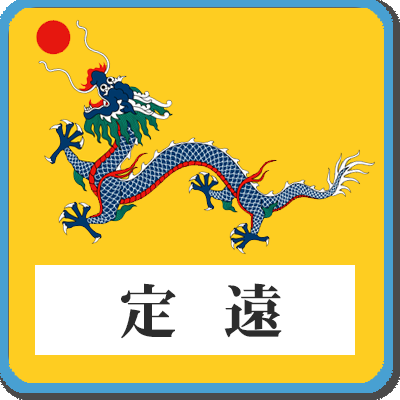
<style>
.page{position:relative;width:400px;height:400px;background:#fecd21}
.page>*{position:absolute;margin:0}
.t1{font:60px "FGPHeiseiMincho-W9";color:#2c2c2c}
</style>
<div class="page">
<p class="t1" style="left:121px;top:283px;width:161px;height:56px">定   遠</p>
</div>
